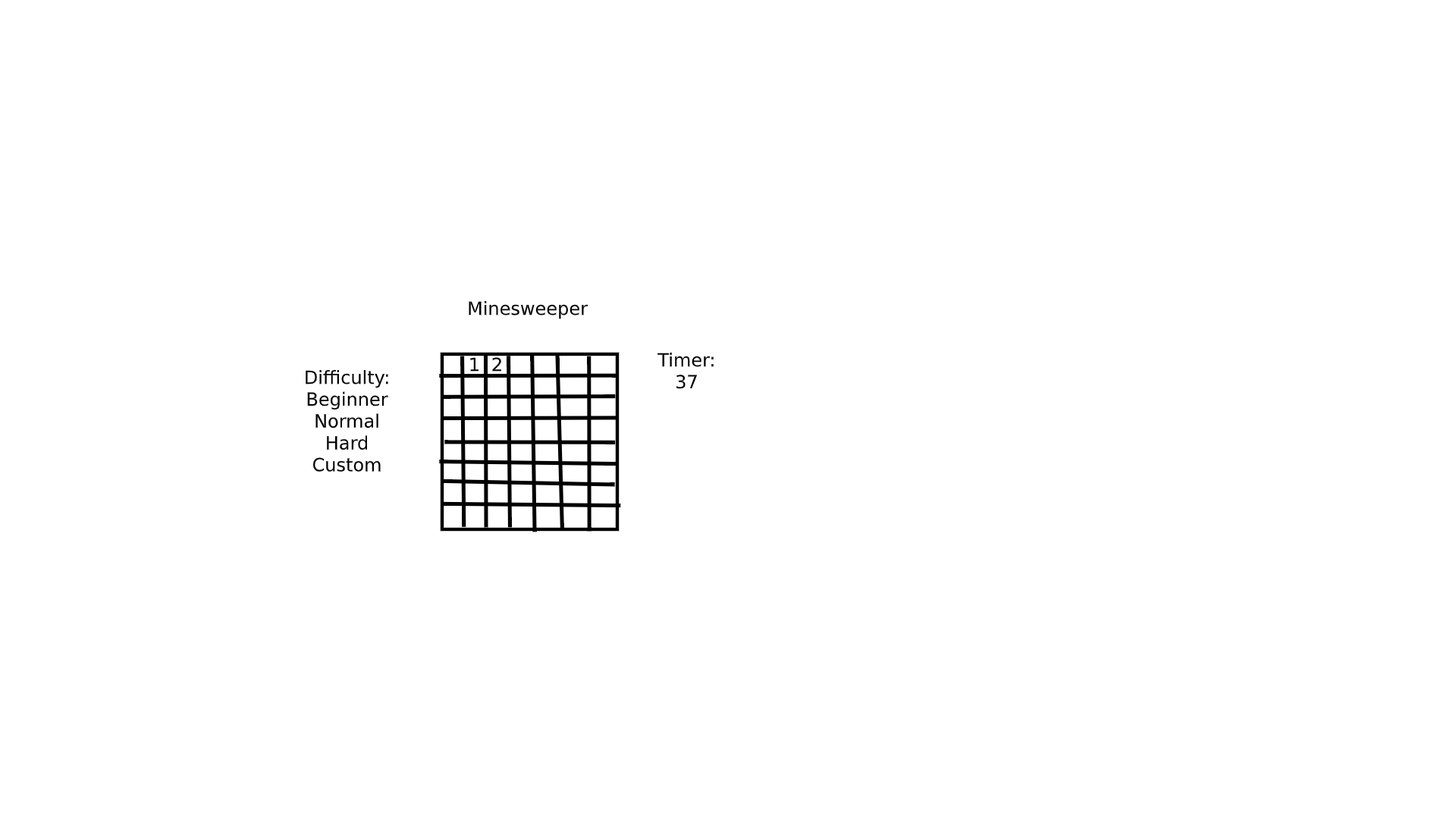
<style>
.page{position:relative;width:1456px;height:819px;background:#ffffff}
.page>*{position:absolute;margin:0}
.t1{font:18.2px "DejaVuSans";color:#000000}
</style>
<div class="page">
<p class="t1" style="left:469px;top:301px;width:119px;height:18px">Minesweeper</p>
<p class="t1" style="left:657px;top:353px;width:57px;height:36px;text-align:center">Timer:<br>37</p>
<p class="t1" style="left:470px;top:357px;width:9px;height:15px">1</p>
<p class="t1" style="left:492px;top:357px;width:9px;height:15px">2</p>
<p class="t1" style="left:306px;top:370px;width:82px;height:102px;text-align:center">Difficulty:<br>Beginner<br>Normal<br>Hard<br>Custom</p>
</div>
